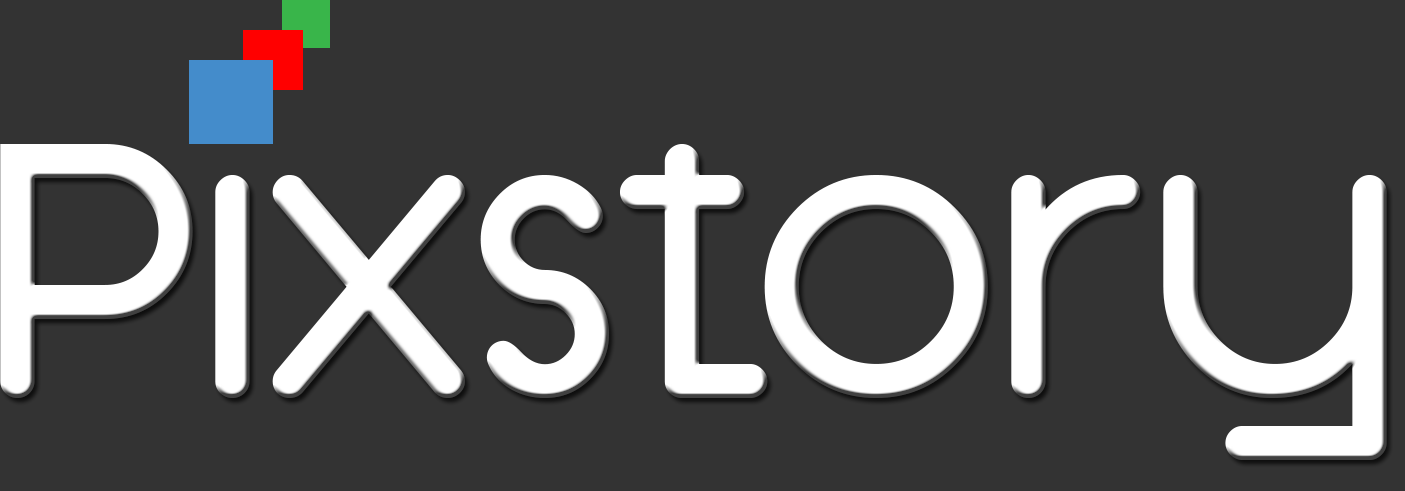
<style>
.page{position:relative;width:1405px;height:491px;background:#333333}
.page>*{position:absolute;margin:0}
.t1{font:372px "SFOrsonCasualHeavy";color:#ffffff}
</style>
<div class="page">
<p class="t1" style="left:0px;top:144px;width:1387px;height:316px">Pixstory</p>
</div>
